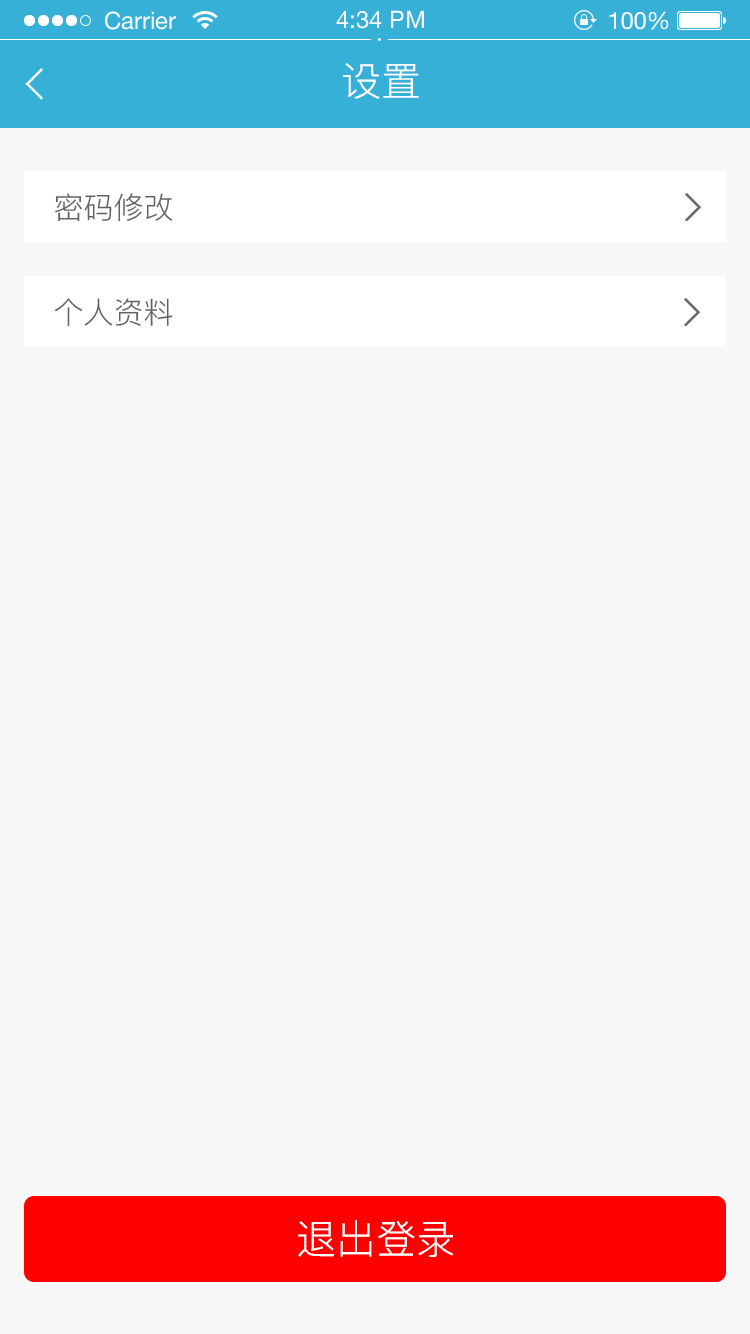
<style>
.page{position:relative;width:750px;height:1334px;background:#f7f7f7}
.page>*{position:absolute;margin:0}
.t1{font:40px "PingFang-SC-Regular";color:#ffffff}
.t2{font:30px "PingFang-SC-Regular";color:#626262}
</style>
<div class="page">
<p class="t1" style="left:343px;top:63px;width:76px;height:36px">设置</p>
<p class="t2" style="left:55px;top:193px;width:118px;height:29px">密码修改</p>
<p class="t2" style="left:54px;top:298px;width:119px;height:29px">个人资料</p>
<p class="t1" style="left:298px;top:1220px;width:155px;height:37px">退出登录</p>
</div>
